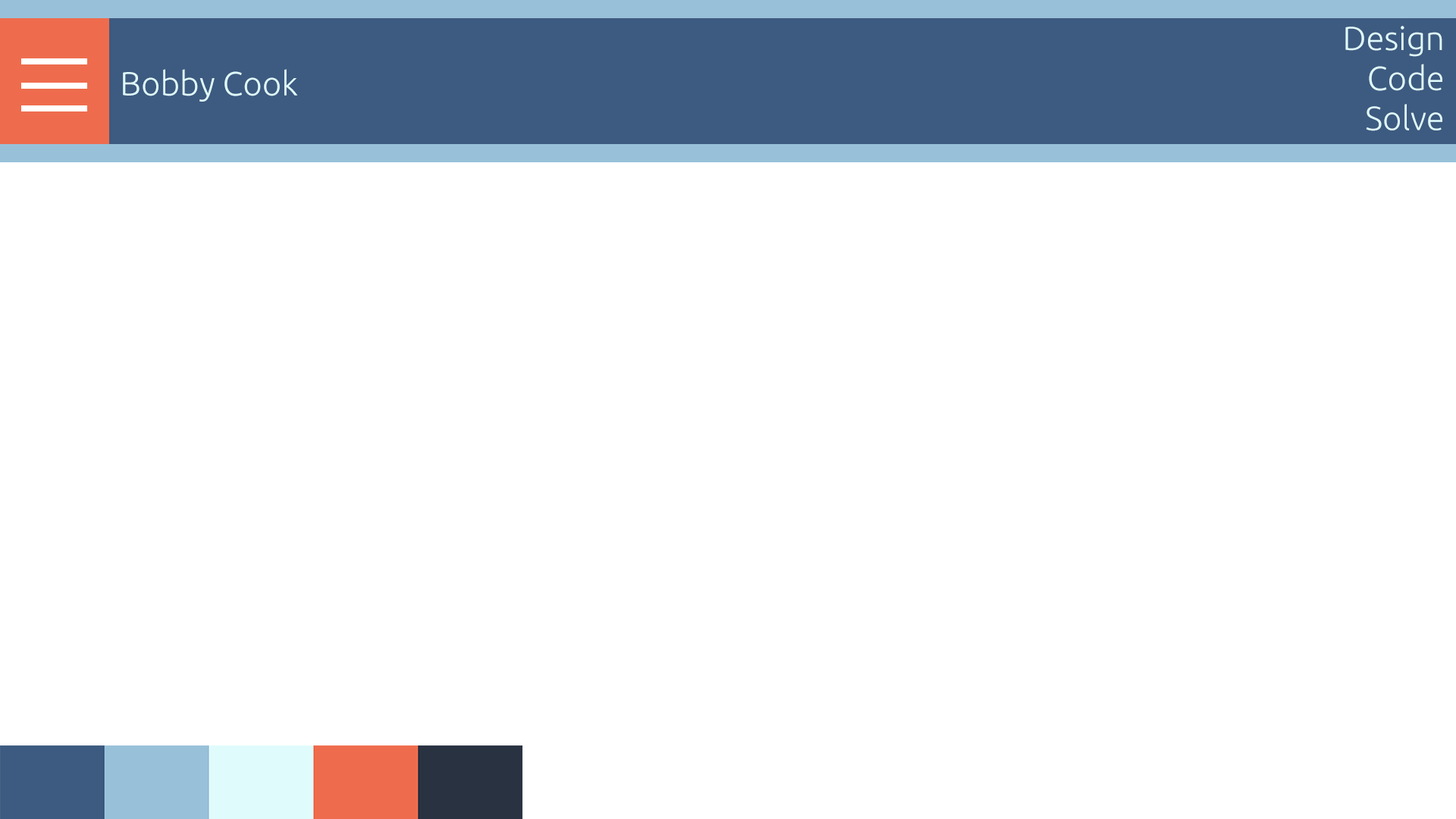
<style>
.page{position:relative;width:1456px;height:819px;background:#ffffff}
.page>*{position:absolute;margin:0}
.t1{font:33.4px "Ubuntu-Light";letter-spacing:-0.001em;color:#e0fbfc}
</style>
<div class="page">
<p class="t1" style="left:1345px;top:26px;width:97px;height:105px;text-align:right">Design<br>Code<br>Solve</p>
<p class="t1" style="left:123px;top:69px;width:175px;height:33px">Bobby Cook</p>
</div>
